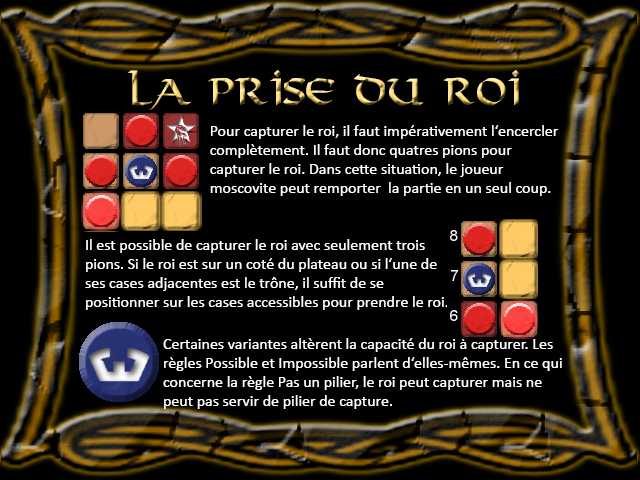
<style>
.page{position:relative;width:640px;height:480px;background:#000000}
.page>*{position:absolute;margin:0}
.t1{font:36px "Viking-Normal"}
.t2{font:16px "Calibri";color:#ffffff}
</style>
<div class="page">
<p class="t1" style="left:127px;top:70px;width:392px;height:40px">La prise du roi</p>
<p class="t2" style="left:210px;top:125px;width:349px;height:71px">Pour capturer le roi, il faut impérativement l‘encercler complètement. Il faut donc quatres pions pour capturer le roi. Dans cette situation, le joueur moscovite peut remporter  la partie en un seul coup.</p>
<p class="t2" style="left:85px;top:239px;width:363px;height:71px">Il est possible de capturer le roi avec seulement trois pions. Si le roi est sur un coté du plateau ou si l‘une de ses cases adjacentes est le trône, il suffit de se positionner sur les cases accessibles pour prendre le roi.</p>
<p class="t2" style="left:163px;top:338px;width:399px;height:71px">Certaines variantes altèrent la capacité du roi à capturer. Les règles Possible et Impossible parlent d‘elles-mêmes. En ce qui concerne la règle Pas un pilier, le roi peut capturer mais ne peut pas servir de pilier de capture.</p>
</div>
